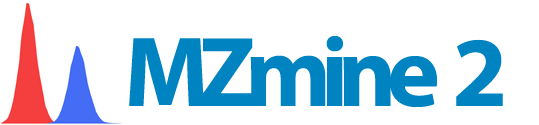
<style>
.page{position:relative;width:539px;height:125px;background:#ffffff}
.page>*{position:absolute;margin:0}
.t1{font:100px "MyriadPro-Bold";letter-spacing:-0.102em;color:#0083c1}
</style>
<div class="page">
<p class="t1" style="left:129px;top:36px;width:374px;height:71px">MZmine  2</p>
</div>
